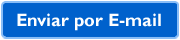
<style>
.page{position:relative;width:180px;height:40px;background:#0061cc}
.page>*{position:absolute;margin:0}
.t1{font:18px "GillSansMT-Bold";color:#ffffff}
</style>
<div class="page">
<p class="t1" style="left:17px;top:13px;width:144px;height:18px">Enviar por E-mail</p>
</div>
